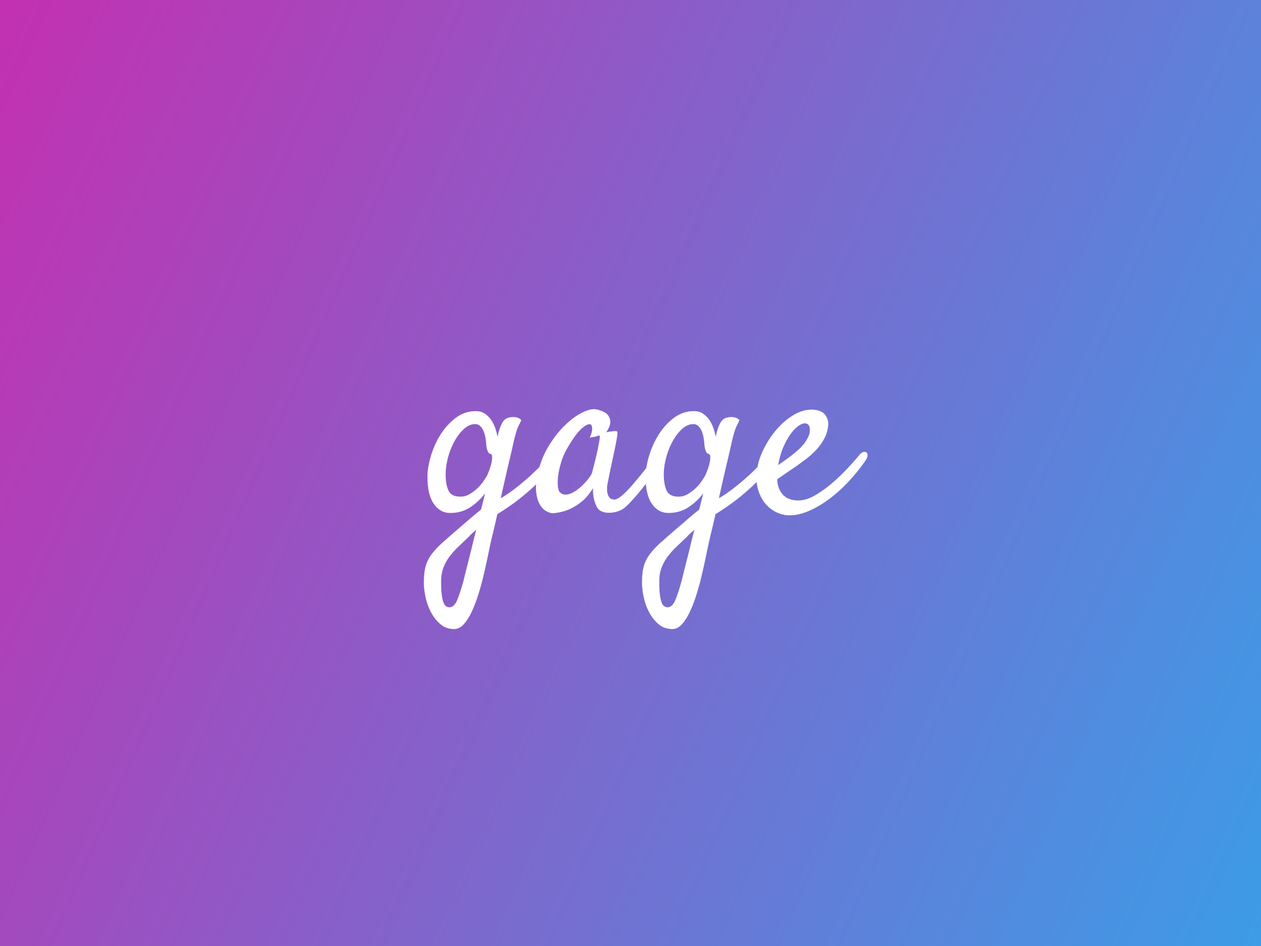
<style>
.page{position:relative;width:1261px;height:946px}
.page>*{position:absolute;margin:0}
.t1{font:243.8px "Satisfy-Regular";color:#ffffff}
</style>
<div class="page">
<p class="t1" style="left:424px;top:409px;width:444px;height:220px">gage</p>
</div>
